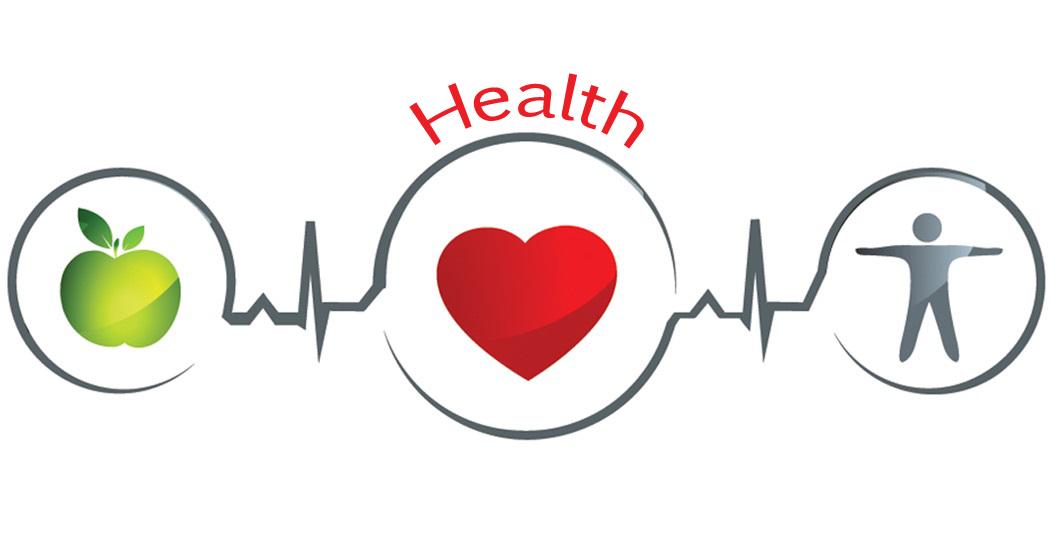
<style>
.page{position:relative;width:1055px;height:537px;background:#ffffff}
.page>*{position:absolute;margin:0}
.t1{font:60px "EuphemiaCAS";color:#eb1e25}
</style>
<div class="page">
<p class="t1" style="left:409px;top:73px;width:235px;height:76px">Health</p>
</div>
